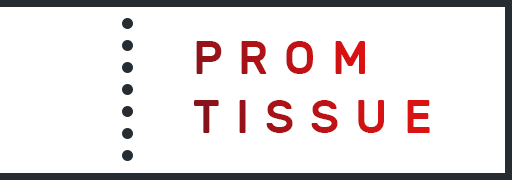
<style>
.page{position:relative;width:512px;height:180px;background:#ffffff}
.page>*{position:absolute;margin:0}
.t1{font:46.9px/59px "Rubik-Medium";letter-spacing:0.36em;text-transform:uppercase;scale:0.96 1}
</style>
<div class="page">
<p class="t1" style="left:194px;top:41px;width:236px;height:92px">prom<br>tissue</p>
</div>
